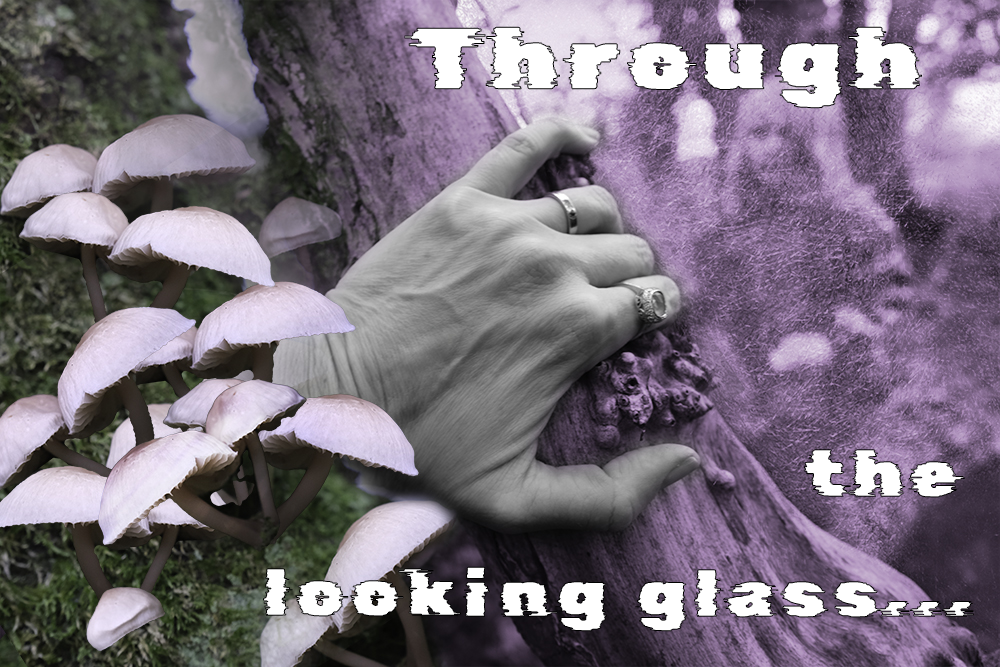
<style>
.page{position:relative;width:1000px;height:667px}
.page>*{position:absolute;margin:0}
.t1{font:86.2px "RubikGlitch-Regular";letter-spacing:0.1em;color:#ffffff;font-weight:bold;scale:1.1 1}
.t2{font:65.7px/109.8px "RubikGlitch-Regular";letter-spacing:0.1em;color:#ffffff;font-weight:bold;scale:1.1 1}
.t3{font:65.7px/120px "RubikGlitch-Regular";letter-spacing:0.1em;color:#ffffff;font-weight:bold;scale:1.1 1}
</style>
<div class="page">
<p class="t1" style="left:404px;top:26px;width:518px;height:83px">Through</p>
<p class="t2" style="left:263px;top:449px;width:711px;height:183px;text-align:right">the <br>looking gla<span class="t3">s</span>s...</p>
</div>
